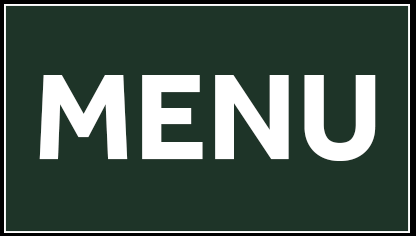
<style>
.page{position:relative;width:416px;height:236px;background:#1e3428}
.page>*{position:absolute;margin:0}
.t1{font:126px "Effra-Bold";color:#ffffff}
</style>
<div class="page">
<p class="t1" style="left:39px;top:75px;width:337px;height:86px">MENU</p>
</div>
